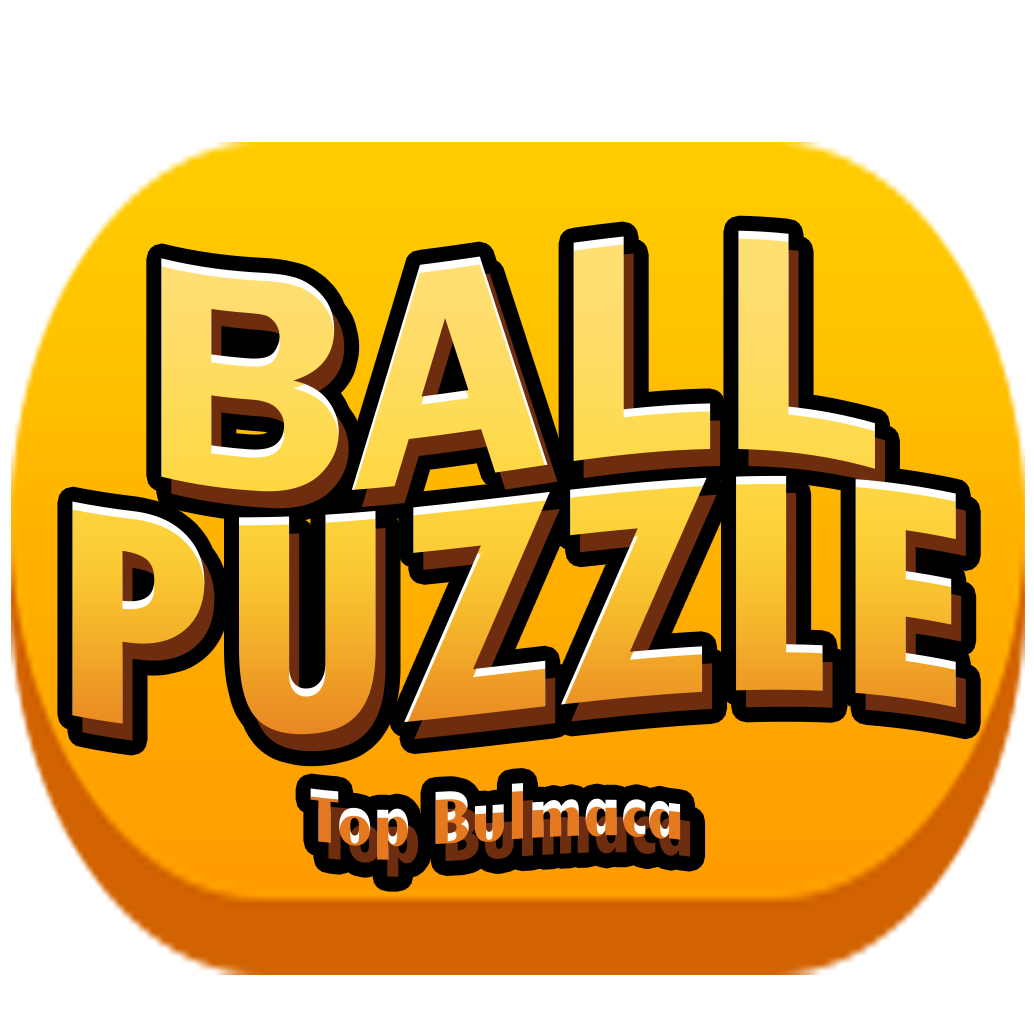
<style>
.page{position:relative;width:1034px;height:1034px;background:#ffffff}
.page>*{position:absolute;margin:0}
.t1{font:327.4px "FranklinGothic-Demi";color:#ffdc60}
.t2{font:327.4px "TwCenMT-CondensedExtraBold"}
.t3{font:79.6px "TwCenMT-CondensedExtraBold"}
</style>
<div class="page">
<p class="t1" style="left:161px;top:230px;width:714px;height:262px">BALL</p>
<p class="t2" style="left:72px;top:475px;width:884px;height:260px">PUZZLE</p>
<p class="t3" style="left:310px;top:783px;width:371px;height:77px">Top Bulmaca</p>
</div>
